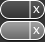
<style>
.page{position:relative;width:45px;height:42px}
.page>*{position:absolute;margin:0}
.t1{font:11.5px "LucidaGrande";letter-spacing:-0.025em;color:#ffffff}
</style>
<div class="page">
<p class="t1" style="left:33px;top:6px;width:7px;height:7px">x</p>
<p class="t1" style="left:33px;top:27px;width:7px;height:7px">x</p>
</div>
